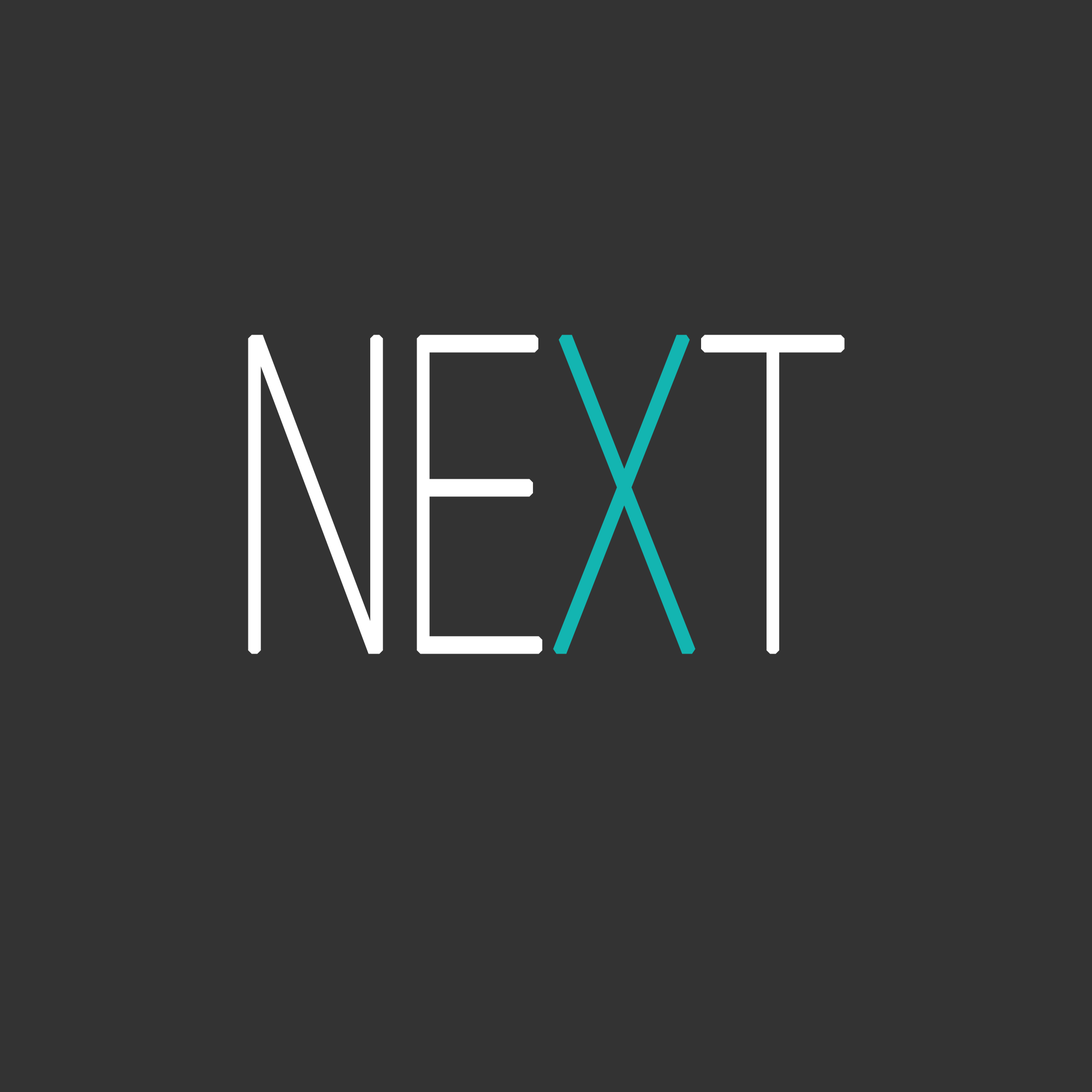
<style>
.page{position:relative;width:1092px;height:1092px;background:#333333}
.page>*{position:absolute;margin:0}
.t1{font:436.8px "PingFangTC-Ultralight";color:#ffffff;font-weight:bold;scale:0.53 1}
.t2{font:436.8px "PingFangTC-Ultralight";color:#13b5b1;font-weight:bold;scale:0.53 1}
</style>
<div class="page">
<p class="t1" style="left:248px;top:335px;width:597px;height:319px">NE<span class="t2">X</span>T</p>
</div>
